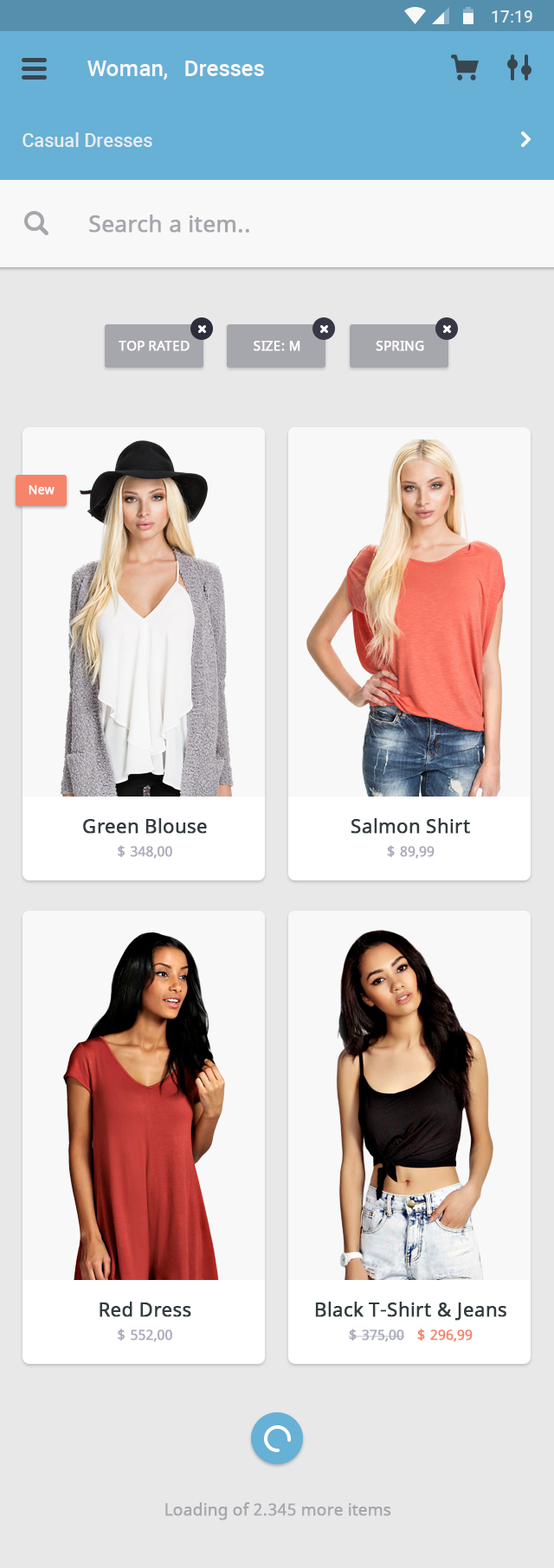
<style>
.page{position:relative;width:554px;height:1568px;background:#e8e8e8}
.page>*{position:absolute;margin:0}
.t1{font:16.4px "Roboto-Medium";color:#e8ecf0}
.t2{font:22.5px "Roboto-Medium";color:#f8f8f8}
.t3{font:19px "Roboto-Medium";color:#e8ecf0}
.t4{font:22.5px "NotoSans";color:#a6a6ad;font-weight:bold}
.t5{font:13px "NotoSans";color:#ffffff;text-transform:uppercase;font-weight:bold}
.t6{font:12.1px "NotoSans";color:#ffffff;font-weight:bold}
.t7{font:19px/23.4px "NotoSans";color:#323c3f;font-weight:bold}
.t8{font:13.8px/23.4px "NotoSans";color:#aaabbc;font-weight:bold}
.t9{font:13.8px/23.4px "NotoSans";color:#f6846a;font-weight:bold}
.t10{font:16.4px "NotoSans";color:#a6a6ad;font-weight:bold}
</style>
<div class="page">
<p class="t1" style="left:491px;top:10px;width:41px;height:12px">17:19</p>
<p class="t2" style="left:87px;top:61px;width:177px;height:19px">Woman,   Dresses</p>
<p class="t3" style="left:22px;top:132px;width:130px;height:15px">Casual Dresses</p>
<p class="t4" style="left:89px;top:214px;width:160px;height:19px">Search a item..</p>
<p class="t5" style="left:118px;top:341px;width:71px;height:10px">top rated</p>
<p class="t5" style="left:253px;top:341px;width:47px;height:10px">size: m</p>
<p class="t5" style="left:375px;top:341px;width:49px;height:10px">spring</p>
<p class="t6" style="left:29px;top:485px;width:25px;height:10px">New</p>
<p class="t7" style="left:83px;top:818px;width:124px;height:41px;text-align:center">Green Blouse<br><span class="t8">$ 348,00</span></p>
<p class="t7" style="left:350px;top:818px;width:120px;height:41px;text-align:center">Salmon Shirt<br><span class="t8">$ 89,99</span></p>
<p class="t7" style="left:99px;top:1302px;width:92px;height:40px;text-align:center">Red Dress<br><span class="t8">$ 552,00</span></p>
<p class="t7" style="left:315px;top:1302px;width:191px;height:40px;text-align:center">Black T-Shirt &amp; Jeans<br><span class="t8">$ 375,00   </span><span class="t9">$ 296,99</span></p>
<p class="t10" style="left:165px;top:1502px;width:226px;height:18px">Loading of 2.345 more items</p>
</div>
